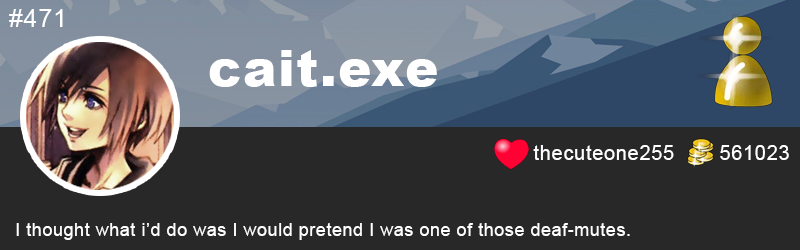
<style>
.page{position:relative;width:800px;height:250px;background:#282828}
.page>*{position:absolute;margin:0}
.t1{font:25px "ArialMT";letter-spacing:0.03em;color:#ffffff}
.t2{font:50px "Arial-Black";letter-spacing:0.03em;color:#ffffff}
.t3{font:20px "ArialMT";letter-spacing:0.03em;color:#ffffff}
.t4{font:18px "ArialMT";letter-spacing:0.03em;color:#ffffff}
</style>
<div class="page">
<p class="t1" style="left:9px;top:9px;width:54px;height:18px">#471</p>
<p class="t2" style="left:209px;top:50px;width:228px;height:37px">cait.exe</p>
<p class="t3" style="left:533px;top:145px;width:141px;height:15px">thecuteone255</p>
<p class="t3" style="left:720px;top:145px;width:69px;height:15px">561023</p>
<p class="t4" style="left:16px;top:223px;width:614px;height:17px">I thought what i’d do was I would pretend I was one of those deaf-mutes.</p>
</div>
